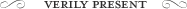
<style>
.page{position:relative;width:187px;height:9px;background:#ffffff}
.page>*{position:absolute;margin:0}
.t1{font:24px "Nymphette";letter-spacing:-0.05em}
.t2{font:21px "MrsEavesPetiteCaps";letter-spacing:-0.05em;color:#2e2c2c}
</style>
<div class="page">
<p class="t1" style="left:0px;top:0px;width:25px;height:9px;rotate:-21deg">K</p>
<p class="t2" style="left:44px;top:0px;width:103px;height:9px">verily present</p>
<p class="t1" style="left:162px;top:0px;width:25px;height:9px;rotate:-159deg">K</p>
</div>
